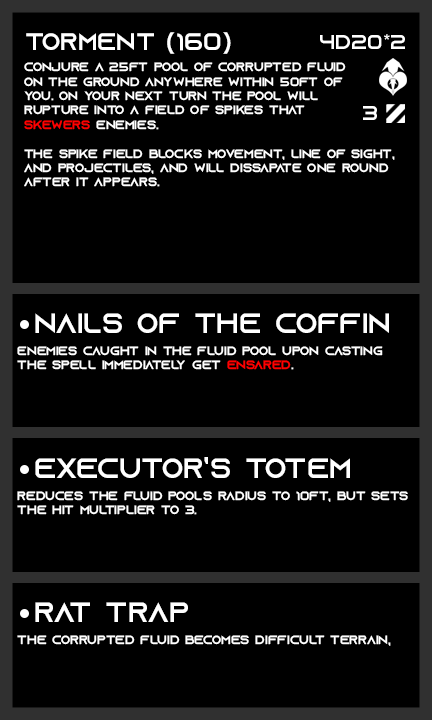
<style>
.page{position:relative;width:432px;height:720px;background:#000000}
.page>*{position:absolute;margin:0}
.t1{font:24px "AzonixRegular";color:#ffffff}
.t2{font:20px "AzonixRegular";color:#ffffff}
.t3{font:12px "AzonixRegular";color:#ffffff}
.t4{font:12px "AzonixRegular";color:#ff0000}
.t5{font:28px "AzonixRegular";color:#ffffff}
</style>
<div class="page">
<p class="t1" style="left:26px;top:32px;width:205px;height:22px">torment (160)</p>
<p class="t2" style="left:320px;top:34px;width:85px;height:15px">4d20*2</p>
<p class="t3" style="left:24px;top:62px;width:371px;height:125px">conjure a 25ft pool of corrupted fluid <br>on the ground anywhere within 50ft of <br>you. on your next turn the pool will <br>rupture into a field of spikes that<br><span class="t4">skewers</span> enemies.<br><br>the spike field blocks movement, line of sight,<br>and projectiles, and will dissapate one round <br>after it appears.</p>
<p class="t2" style="left:363px;top:106px;width:14px;height:14px">3</p>
<p class="t5" style="left:35px;top:313px;width:354px;height:20px">nails of the coffin</p>
<p class="t3" style="left:17px;top:346px;width:366px;height:24px">enemies caught in the fluid pool upon casting<br>the spell immediately get <span class="t4">ensared</span>.</p>
<p class="t5" style="left:35px;top:457px;width:315px;height:21px">executor’s totem</p>
<p class="t3" style="left:17px;top:491px;width:391px;height:24px">reduces the fluid pools radius to 10ft, but sets<br>the hit multiplier to 3.</p>
<p class="t5" style="left:35px;top:602px;width:153px;height:20px">rat trap</p>
<p class="t3" style="left:17px;top:635px;width:374px;height:11px">the corrupted fluid becomes difficult terrain,</p>
</div>
